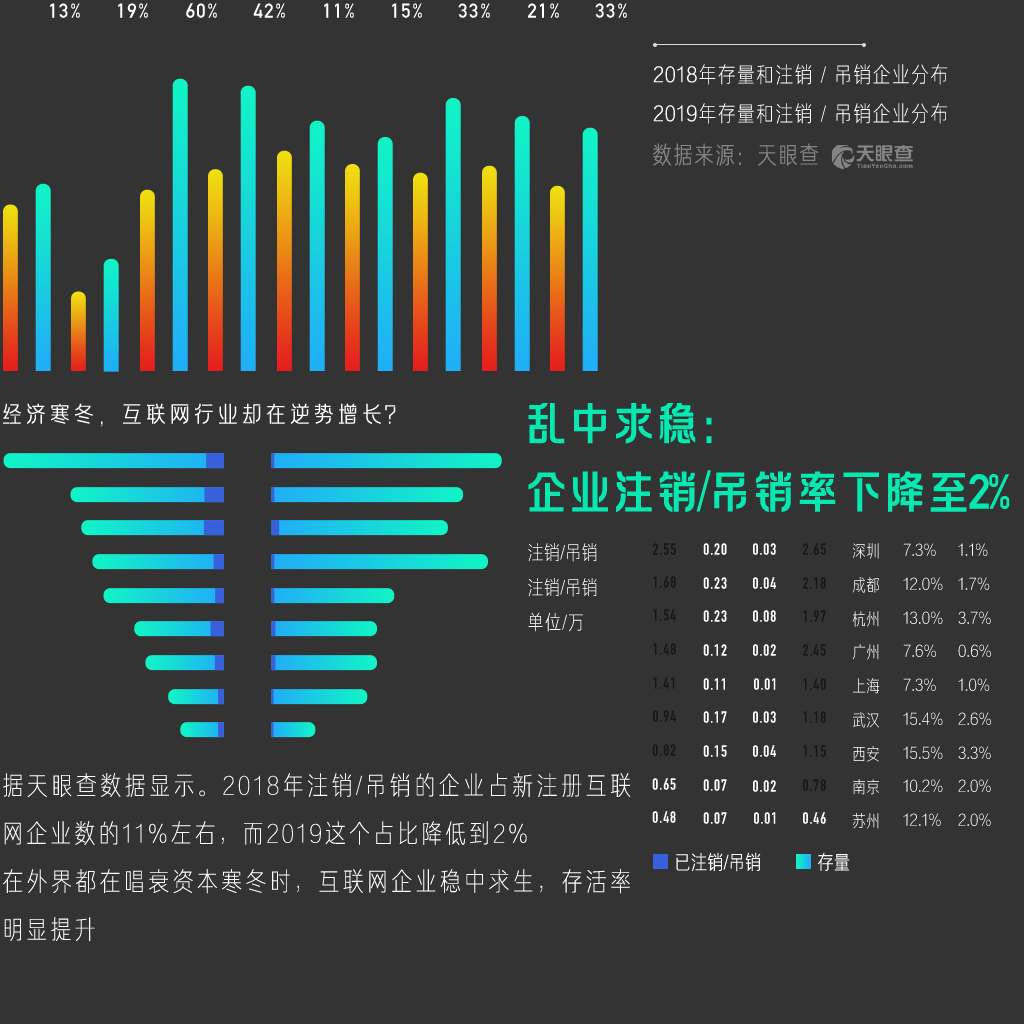
<style>
.page{position:relative;width:1024px;height:1024px;background:#333333}
.page>*{position:absolute;margin:0}
.t1{font:20px "DINAlternate-Bold";letter-spacing:0.06em;color:#ffffff}
.t2{font:22px "FZJUNH_XIANJW--GB1-0";letter-spacing:0.05em;color:#ffffff;text-transform:uppercase}
.t3{font:22px "FZJUNH_XIJW--GB1-0";letter-spacing:0.05em;color:#ffffff;text-transform:uppercase}
.t4{font:24px "FZJUNH_XIJW--GB1-0";letter-spacing:0.05em;color:#858585;text-transform:uppercase}
.t5{font:24px "FZLAGBTTS_XI--GB1-0";color:#ffffff;text-transform:uppercase}
.t6{font:48px/34px "FZLAGBTTS_ZHONG--GB1-0";letter-spacing:-0.09em;color:#05e9b1;text-transform:uppercase}
.t7{font:48px/34px "DINAlternate-Bold";letter-spacing:-0.09em;color:#05e9b1;text-transform:uppercase}
.t8{font:20px "FZJUNH_XIJW--GB1-0";color:#ffffff}
.t9{font:16px "DINCondensed-Bold";letter-spacing:0.06em;color:#15181a}
.t10{font:16px "DINCondensed-Bold";letter-spacing:0.06em;color:#ffffff}
.t11{font:17px "FZJUNH_XIJW--GB1-0";color:#ffffff}
.t12{font:17px "FZJUNH_XIJW--GB1-0"}
.t13{font:20px "FZJUNH_XIANJW--GB1-0";letter-spacing:0.05em;color:#ffffff;text-transform:uppercase}
.t14{font:26px/48px "FZJUNH_XIANJW--GB1-0";letter-spacing:0.1em;color:#ffffff}
.t15{font:20px "FZJUNH_XIJW--GB1-0";color:#ffffff;text-transform:uppercase}
</style>
<div class="page">
<p class="t1" style="left:50px;top:3px;width:30px;height:15px">13%</p>
<p class="t1" style="left:118px;top:3px;width:30px;height:15px">19%</p>
<p class="t1" style="left:186px;top:3px;width:31px;height:15px">60%</p>
<p class="t1" style="left:253px;top:3px;width:32px;height:15px">42%</p>
<p class="t1" style="left:324px;top:3px;width:30px;height:15px">11%</p>
<p class="t1" style="left:392px;top:3px;width:30px;height:15px">15%</p>
<p class="t1" style="left:458px;top:3px;width:32px;height:15px">33%</p>
<p class="t1" style="left:528px;top:3px;width:31px;height:15px">21%</p>
<p class="t1" style="left:595px;top:3px;width:32px;height:15px">33%</p>
<p class="t2" style="left:653px;top:64px;width:295px;height:21px"><span class="t3">2018</span>年存量和注销 / 吊销企业分布</p>
<p class="t2" style="left:653px;top:103px;width:295px;height:21px"><span class="t3">2019</span>年存量和注销 / 吊销企业分布</p>
<p class="t4" style="left:653px;top:143px;width:165px;height:23px">数据来源：天眼查</p>
<p class="t5" style="left:3px;top:403px;width:393px;height:24px">经济寒冬，互联网行业却在逆势增长？</p>
<p class="t6" style="left:528px;top:403px;width:482px;height:109px">乱中求稳：<br><br>企业注销/吊销率下降至<span class="t7">2%</span></p>
<p class="t8" style="left:528px;top:543px;width:69px;height:19px">注销/吊销</p>
<p class="t9" style="left:653px;top:543px;width:23px;height:12px">2.55</p>
<p class="t10" style="left:703px;top:543px;width:24px;height:12px">0.20</p>
<p class="t10" style="left:753px;top:543px;width:23px;height:12px">0.03</p>
<p class="t9" style="left:803px;top:543px;width:23px;height:12px">2.65</p>
<p class="t11" style="left:852px;top:543px;width:27px;height:16px">深圳</p>
<p class="t12" style="left:903px;top:543px;width:33px;height:13px">7.3%</p>
<p class="t11" style="left:958px;top:543px;width:30px;height:13px">1.1%</p>
<p class="t8" style="left:528px;top:578px;width:69px;height:19px">注销/吊销</p>
<p class="t9" style="left:653px;top:576px;width:23px;height:12px">1.68</p>
<p class="t10" style="left:703px;top:577px;width:24px;height:12px">0.23</p>
<p class="t10" style="left:753px;top:577px;width:23px;height:12px">0.04</p>
<p class="t9" style="left:803px;top:577px;width:23px;height:12px">2.18</p>
<p class="t11" style="left:852px;top:577px;width:27px;height:16px">成都</p>
<p class="t11" style="left:903px;top:577px;width:40px;height:13px">12.0%</p>
<p class="t12" style="left:958px;top:577px;width:32px;height:13px">1.7%</p>
<p class="t13" style="left:528px;top:612px;width:55px;height:20px">单位/万</p>
<p class="t9" style="left:653px;top:609px;width:23px;height:12px">1.54</p>
<p class="t10" style="left:703px;top:610px;width:24px;height:12px">0.23</p>
<p class="t10" style="left:753px;top:610px;width:23px;height:12px">0.08</p>
<p class="t9" style="left:803px;top:610px;width:23px;height:12px">1.97</p>
<p class="t12" style="left:852px;top:611px;width:27px;height:16px">杭州</p>
<p class="t11" style="left:903px;top:611px;width:40px;height:13px">13.0%</p>
<p class="t12" style="left:958px;top:611px;width:33px;height:13px">3.7%</p>
<p class="t9" style="left:653px;top:643px;width:23px;height:12px">1.48</p>
<p class="t10" style="left:703px;top:644px;width:24px;height:12px">0.12</p>
<p class="t10" style="left:753px;top:644px;width:23px;height:12px">0.02</p>
<p class="t9" style="left:803px;top:644px;width:23px;height:12px">2.45</p>
<p class="t12" style="left:852px;top:644px;width:27px;height:16px">广州</p>
<p class="t12" style="left:903px;top:644px;width:33px;height:13px">7.6%</p>
<p class="t11" style="left:958px;top:644px;width:33px;height:13px">0.6%</p>
<p class="t9" style="left:653px;top:677px;width:22px;height:12px">1.41</p>
<p class="t10" style="left:703px;top:678px;width:22px;height:12px">0.11</p>
<p class="t10" style="left:754px;top:678px;width:22px;height:12px">0.01</p>
<p class="t9" style="left:803px;top:678px;width:23px;height:12px">1.40</p>
<p class="t11" style="left:853px;top:678px;width:27px;height:16px">上海</p>
<p class="t12" style="left:903px;top:678px;width:33px;height:13px">7.3%</p>
<p class="t11" style="left:958px;top:678px;width:32px;height:13px">1.0%</p>
<p class="t9" style="left:653px;top:710px;width:23px;height:12px">0.94</p>
<p class="t10" style="left:703px;top:711px;width:24px;height:12px">0.17</p>
<p class="t10" style="left:753px;top:711px;width:23px;height:12px">0.03</p>
<p class="t9" style="left:803px;top:711px;width:23px;height:12px">1.18</p>
<p class="t11" style="left:853px;top:712px;width:26px;height:16px">武汉</p>
<p class="t11" style="left:903px;top:712px;width:40px;height:13px">15.4%</p>
<p class="t12" style="left:958px;top:712px;width:33px;height:13px">2.6%</p>
<p class="t9" style="left:652px;top:744px;width:24px;height:12px">0.82</p>
<p class="t10" style="left:703px;top:745px;width:24px;height:12px">0.15</p>
<p class="t10" style="left:753px;top:745px;width:23px;height:12px">0.04</p>
<p class="t9" style="left:803px;top:745px;width:23px;height:12px">1.15</p>
<p class="t12" style="left:853px;top:746px;width:26px;height:16px">西安</p>
<p class="t12" style="left:903px;top:746px;width:40px;height:13px">15.5%</p>
<p class="t12" style="left:958px;top:746px;width:33px;height:13px">3.3%</p>
<p class="t14" style="left:3px;top:773px;width:628px;height:168px;text-align:justify">据天眼查数据显示。2018年注销/吊销的企业占新注册互联网企业数的11%左右，而2019这个占比降低到2%<br>在外界都在唱衰资本寒冬时，互联网企业稳中求生，存活率明显提升</p>
<p class="t10" style="left:652px;top:778px;width:24px;height:12px">0.65</p>
<p class="t10" style="left:703px;top:779px;width:24px;height:12px">0.07</p>
<p class="t10" style="left:753px;top:780px;width:23px;height:12px">0.02</p>
<p class="t9" style="left:803px;top:779px;width:23px;height:12px">0.78</p>
<p class="t12" style="left:853px;top:779px;width:26px;height:16px">南京</p>
<p class="t11" style="left:903px;top:779px;width:40px;height:13px">10.2%</p>
<p class="t12" style="left:958px;top:779px;width:33px;height:13px">2.0%</p>
<p class="t10" style="left:652px;top:811px;width:24px;height:12px">0.48</p>
<p class="t10" style="left:703px;top:812px;width:24px;height:12px">0.07</p>
<p class="t10" style="left:754px;top:812px;width:22px;height:12px">0.01</p>
<p class="t10" style="left:803px;top:812px;width:23px;height:12px">0.46</p>
<p class="t11" style="left:852px;top:813px;width:27px;height:16px">苏州</p>
<p class="t12" style="left:903px;top:813px;width:38px;height:13px">12.1%</p>
<p class="t12" style="left:958px;top:813px;width:33px;height:13px">2.0%</p>
<p class="t15" style="left:676px;top:852px;width:85px;height:20px">已注销/吊销</p>
<p class="t15" style="left:818px;top:852px;width:32px;height:19px">存量</p>
</div>
